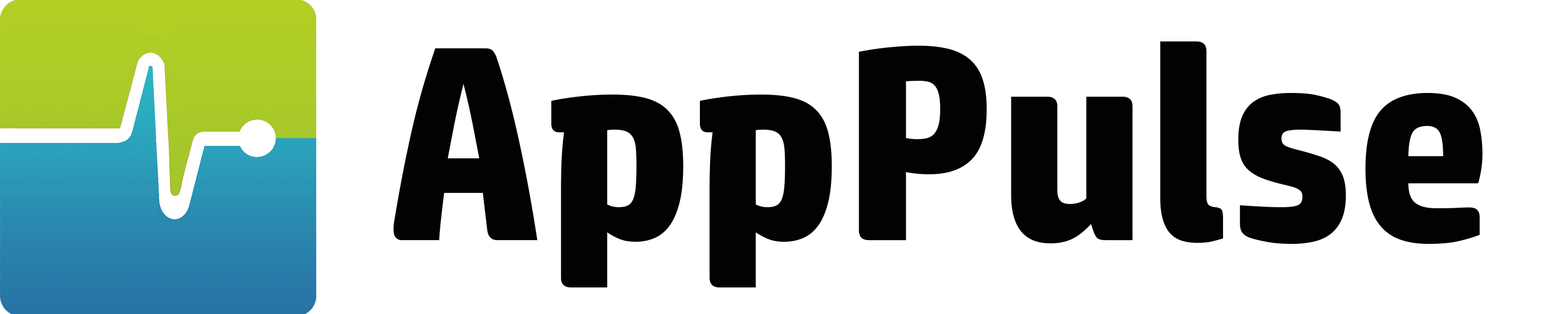
<style>
.page{position:relative;width:1568px;height:314px;background:#ffffff}
.page>*{position:absolute;margin:0}
.t1{font:276.4px "HPSimplified-Bold";color:#020202}
</style>
<div class="page">
<p class="t1" style="left:393px;top:41px;width:1090px;height:246px">AppPulse</p>
</div>
